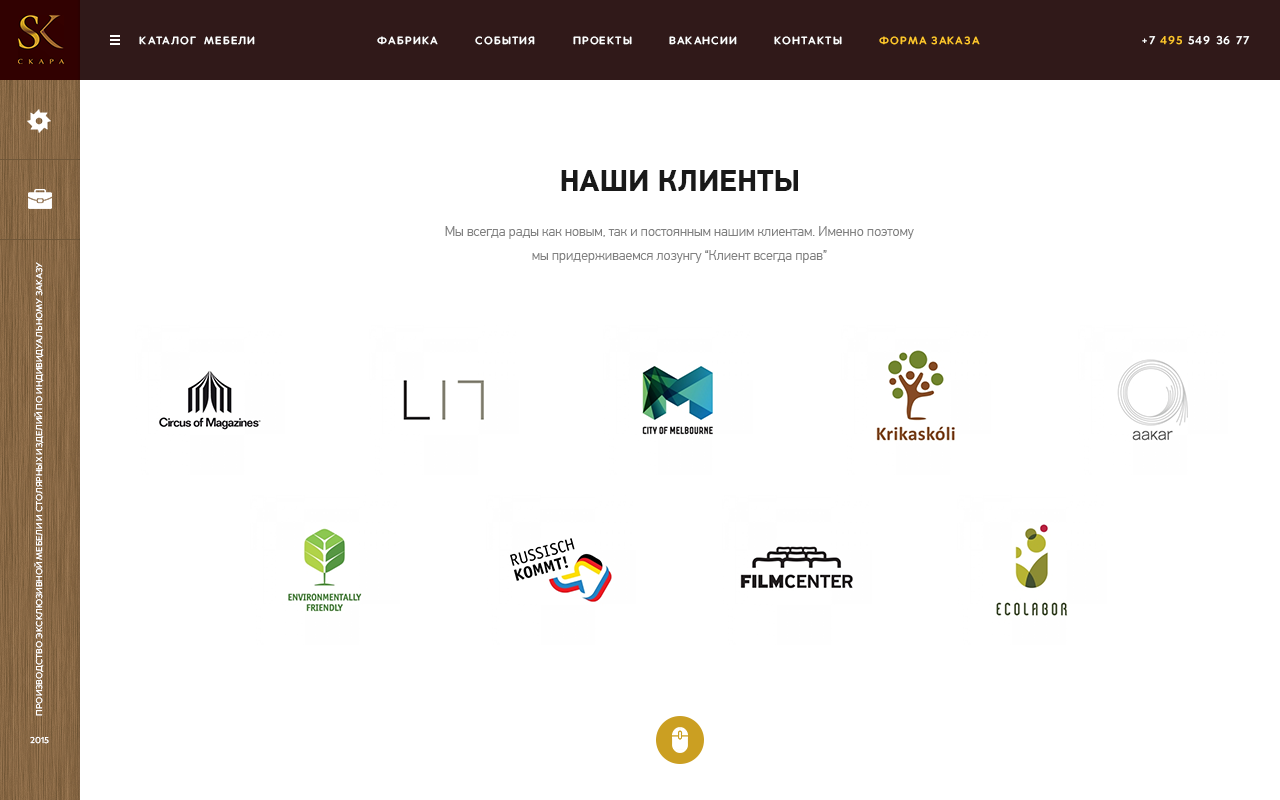
<style>
.page{position:relative;width:1280px;height:800px;background:#ffffff}
.page>*{position:absolute;margin:0}
.t1{font:11px "Merel-Medium";letter-spacing:0.1em;color:#ffffff;text-transform:uppercase}
.t2{font:11px "Merel-Medium";letter-spacing:0.1em;color:#ffc72b;text-transform:uppercase}
.t3{font:12px "Merel-Medium";letter-spacing:0.1em;color:#ffffff;text-transform:uppercase}
.t4{font:12px "Merel-Medium";letter-spacing:0.1em;color:#ffc72b;text-transform:uppercase}
.t5{font:30px "PFDinTextPro-Bold";color:#191919;text-transform:uppercase}
.t6{font:14px/24px "PFDinTextPro-Light";color:#808080}
.t7{font:9px "Merel-Regular";color:#ffffff;text-transform:uppercase}
</style>
<div class="page">
<p class="t1" style="left:139px;top:36px;width:116px;height:9px">каталог  мебели</p>
<p class="t1" style="left:377px;top:36px;width:603px;height:9px">фабрика          события          проекты          вакансии          контакты<span class="t2">          форма заказа</span></p>
<p class="t3" style="left:1142px;top:35px;width:108px;height:10px">+7 <span class="t4">495</span> 549 36 77</p>
<p class="t5" style="left:561px;top:170px;width:237px;height:21px">наши клиенты</p>
<p class="t6" style="left:445px;top:226px;width:469px;height:37px;text-align:center">Мы всегда рады как новым, так и постоянным нашим клиентам. Именно поэтому <br>мы придерживаемся лозунгу “Клиент всегда прав”</p>
<p class="t7" style="left:34px;top:262px;width:10px;height:454px;rotate:-90deg">производство эксклюзивной мебели и столярных изделий по индивидуальному заказу</p>
<p class="t7" style="left:30px;top:736px;width:19px;height:8px">2015</p>
</div>
